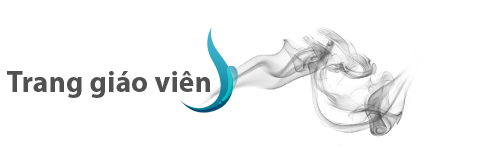
<style>
.page{position:relative;width:498px;height:150px;background:#ffffff}
.page>*{position:absolute;margin:0}
.t1{font:30px "MyriadPro-Bold";color:#515151}
</style>
<div class="page">
<p class="t1" style="left:7px;top:71px;width:203px;height:27px">Trang giáo viên</p>
</div>
